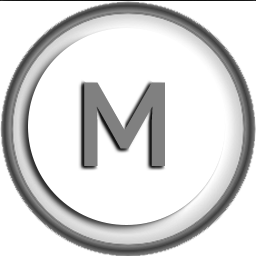
<style>
.page{position:relative;width:256px;height:256px;background:#ffffff}
.page>*{position:absolute;margin:0}
.t1{font:116.4px "ProductSans-Medium";color:#808080}
</style>
<div class="page">
<p class="t1" style="left:84px;top:81px;width:81px;height:84px">M</p>
</div>
